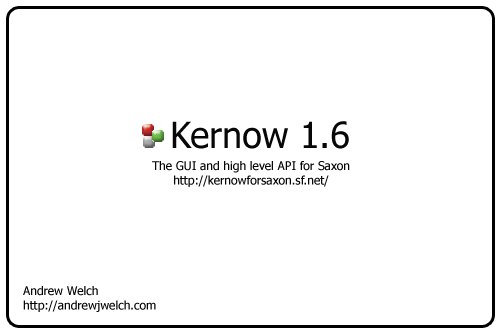
<style>
.page{position:relative;width:500px;height:333px;background:#ffffff}
.page>*{position:absolute;margin:0}
.t1{font:36px "Tahoma";color:#080707}
.t2{font:12px "Tahoma";color:#080707}
</style>
<div class="page">
<p class="t1" style="left:172px;top:121px;width:177px;height:28px">Kernow 1.6</p>
<p class="t2" style="left:152px;top:161px;width:198px;height:26px;text-align:center">The GUI and high level API for Saxon<br>http://kernowforsaxon.sf.net/</p>
<p class="t2" style="left:23px;top:286px;width:133px;height:26px">Andrew Welch<br>http://andrewjwelch.com</p>
</div>
